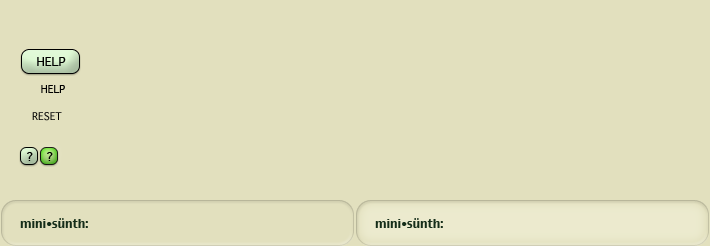
<style>
.page{position:relative;width:710px;height:246px;background:#e2e0be}
.page>*{position:absolute;margin:0}
.t1{font:12px "Geneva";color:#000000}
.t2{font:10px "Geneva";color:#000000}
.t3{font:12px "Charcoal";color:#152d19}
.t4{font:10px "Charcoal";color:#152d19}
</style>
<div class="page">
<p class="t1" style="left:37px;top:57px;width:29px;height:9px">HELP</p>
<p class="t2" style="left:41px;top:85px;width:24px;height:8px">HELP</p>
<p class="t2" style="left:32px;top:112px;width:30px;height:9px">RESET</p>
<p class="t1" style="left:27px;top:152px;width:6px;height:9px">?</p>
<p class="t1" style="left:47px;top:152px;width:6px;height:9px">?</p>
<p class="t3" style="left:20px;top:218px;width:68px;height:10px">mini<span class="t4">•</span>sünth:</p>
<p class="t3" style="left:375px;top:218px;width:68px;height:10px">mini<span class="t4">•</span>sünth:</p>
</div>
